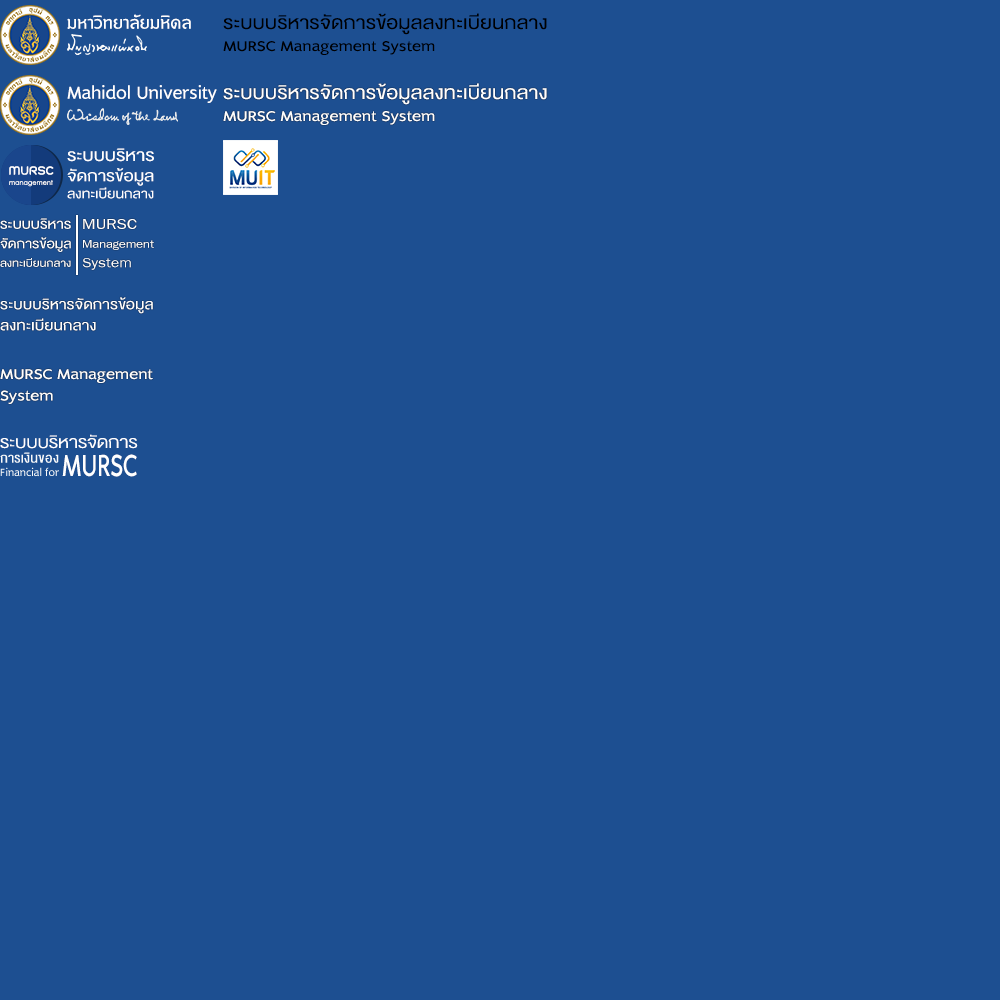
<style>
.page{position:relative;width:1000px;height:1000px;background:#1d4f91}
.page>*{position:absolute;margin:0}
.t1{font:22.1px "DBLimX";color:#ffffff}
.t2{font:26px "DBHelvethaicaX-55Regular";color:#000000;scale:1.13 1}
.t3{font:18px "DBLimX";color:#000000;scale:1.13 1}
.t4{font:26px "DBHelvethaicaX-55Regular";color:#ffffff;scale:1.13 1}
.t5{font:18px "DBLimX";color:#ffffff;scale:1.13 1}
.t6{font:23.5px "DBHelvethaicaX-55Regular";color:#ffffff;scale:1.13 1}
.t7{font:22.1px "DBHelvethaicaX-55Regular";color:#ffffff;scale:1.13 1}
.t8{font:18.1px "DBHelvethaicaX-55Regular";color:#ffffff;scale:1.13 1}
.t9{font:19.2px "DBHelvethaicaX-55Regular";color:#ffffff;scale:1.13 1}
.t10{font:22.5px "FreesiaUPC";color:#ffffff;scale:1.13 1}
.t11{font:17.1px "FreesiaUPC";color:#ffffff;scale:1.13 1}
.t12{font:14.8px "DBHelvethaicaX-55Regular";color:#ffffff;scale:1.13 1}
.t13{font:20.8px "FreesiaUPC";color:#ffffff;scale:1.13 1}
.t14{font:20px "DBHelvethaicaX-55Regular";color:#ffffff;scale:1.13 1}
.t15{font:17.9px "DBLimX";color:#ffffff;scale:1.13 1}
.t16{font:23.5px "DBHelvethaicaX-45Li";color:#ffffff;scale:1.13 1}
.t17{font:38.7px "DBLimX";color:#ffffff;scale:0.75 1}
</style>
<div class="page">
<p class="t1" style="left:67px;top:14px;width:124px;height:15px">มหาวิทยาลัยมหิดล</p>
<p class="t2" style="left:223px;top:13px;width:324px;height:22px">ระบบบริหารจัดการข้อมูลลงทะเบียนกลาง</p>
<p class="t3" style="left:223px;top:41px;width:212px;height:14px">MURSC Management System</p>
<p class="t1" style="left:67px;top:85px;width:150px;height:18px">Mahidol University</p>
<p class="t4" style="left:223px;top:83px;width:324px;height:22px">ระบบบริหารจัดการข้อมูลลงทะเบียนกลาง</p>
<p class="t5" style="left:223px;top:111px;width:212px;height:14px">MURSC Management System</p>
<p class="t6" style="left:67px;top:148px;width:87px;height:14px">ระบบบริหาร</p>
<p class="t7" style="left:67px;top:168px;width:87px;height:18px">จัดการข้อมูล</p>
<p class="t8" style="left:67px;top:187px;width:87px;height:12px">ลงทะเบียนกลาง</p>
<p class="t9" style="left:0px;top:218px;width:71px;height:11px">ระบบบริหาร</p>
<p class="t10" style="left:83px;top:219px;width:54px;height:10px">MURSC</p>
<p class="t8" style="left:0px;top:237px;width:71px;height:15px">จัดการข้อมูล</p>
<p class="t11" style="left:83px;top:240px;width:71px;height:10px">Management</p>
<p class="t12" style="left:0px;top:258px;width:71px;height:9px">ลงทะเบียนกลาง</p>
<p class="t13" style="left:82px;top:258px;width:49px;height:12px">System</p>
<p class="t14" style="left:0px;top:297px;width:153px;height:17px">ระบบบริหารจัดการข้อมูล</p>
<p class="t14" style="left:0px;top:318px;width:96px;height:13px">ลงทะเบียนกลาง</p>
<p class="t15" style="left:0px;top:369px;width:153px;height:35px">MURSC Management<br>System</p>
<p class="t16" style="left:0px;top:434px;width:138px;height:15px">ระบบบริหารจัดการ</p>
<p class="t17" style="left:62px;top:454px;width:75px;height:23px">MURSC</p>
</div>
